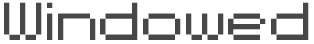
<style>
.page{position:relative;width:314px;height:44px;background:#ffffff}
.page>*{position:absolute;margin:0}
.t1{font:48px "BMspaceA9";color:#474748}
</style>
<div class="page">
<p class="t1" style="left:4px;top:2px;width:305px;height:38px">Windowed</p>
</div>
